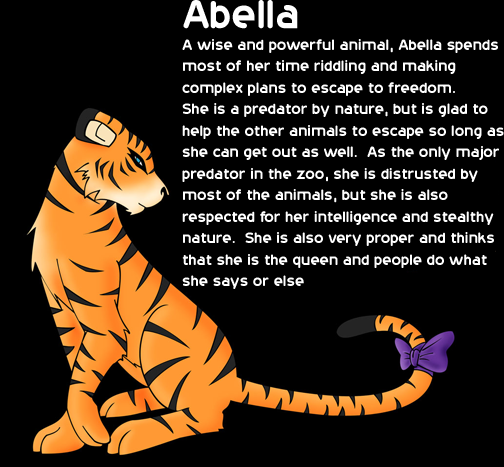
<style>
.page{position:relative;width:504px;height:467px;background:#000000}
.page>*{position:absolute;margin:0}
.t1{font:17.9px "20thCenturyFont";color:#ffffff}
.t2{font:47.8px "20thCenturyFont";color:#ffffff}
</style>
<div class="page">
<p class="t1" style="left:182px;top:0px;width:322px;height:289px"><span class="t2">Abella<br></span>A wise and powerful animal, Abella spends <br>most of her time riddling and making <br>complex plans to escape to freedom.  <br>She is a predator by nature, but is glad to <br>help the other animals to escape so long as <br>she can get out as well.  As the only major <br>predator in the zoo, she is distrusted by <br>most of the animals, but she is also <br>respected for her intelligence and stealthy <br>nature.  She is also very proper and thinks <br>that she is the queen and people do what <br>she says or else</p>
</div>
